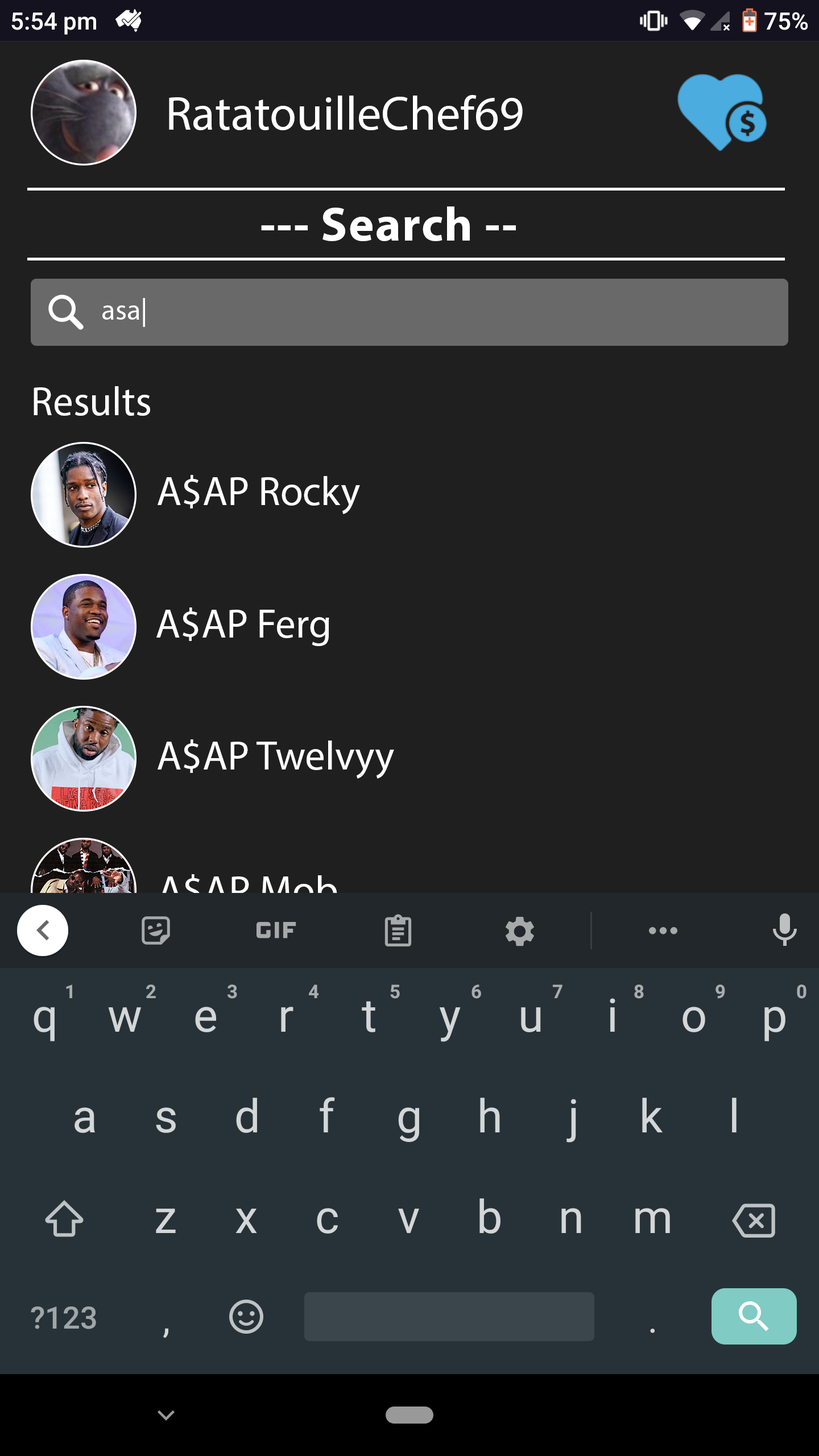
<style>
.page{position:relative;width:819px;height:1456px;background:#1f1f1f}
.page>*{position:absolute;margin:0}
.t1{font:48.3px "MyriadPro-Regular";color:#ffffff}
.t2{font:48.3px "MyriadPro-Bold";letter-spacing:0.025em;color:#ffffff}
.t3{font:28.9px "MyriadPro-Regular";color:#ffffff}
.t4{font:40.9px "MyriadPro-Regular";color:#ffffff}
.t5{font:40.9px "MyriadPro-Regular"}
</style>
<div class="page">
<p class="t1" style="left:169px;top:95px;width:354px;height:35px">RatatouilleChef69</p>
<p class="t2" style="left:261px;top:206px;width:255px;height:35px">--- Search --</p>
<p class="t3" style="left:102px;top:298px;width:43px;height:29px">asa|</p>
<p class="t4" style="left:34px;top:386px;width:116px;height:30px">Results</p>
<p class="t4" style="left:158px;top:475px;width:202px;height:39px">A$AP Rocky</p>
<p class="t4" style="left:156px;top:607px;width:173px;height:39px">A$AP Ferg</p>
<p class="t4" style="left:158px;top:739px;width:236px;height:40px">A$AP Twelvyy</p>
<p class="t5" style="left:159px;top:874px;width:178px;height:34px">A$AP Mob</p>
</div>
